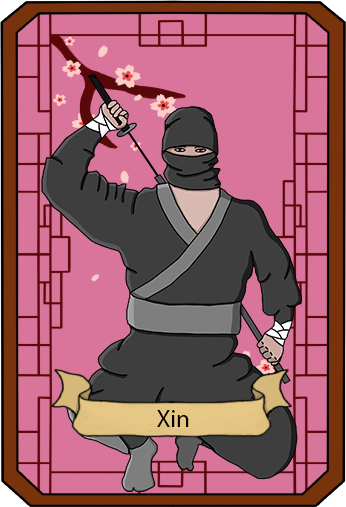
<style>
.page{position:relative;width:346px;height:507px;background:#d9749a}
.page>*{position:absolute;margin:0}
.t1{font:25px "MyriadPro-Regular";color:#000000}
</style>
<div class="page">
<p class="t1" style="left:157px;top:410px;width:32px;height:17px">Xin</p>
</div>
